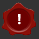
<style>
.page{position:relative;width:39px;height:39px;background:#333333}
.page>*{position:absolute;margin:0}
.t1{font:14px "LaoUI-Bold";color:#ffffff}
</style>
<div class="page">
<p class="t1" style="left:18px;top:14px;width:3px;height:11px">!</p>
</div>
